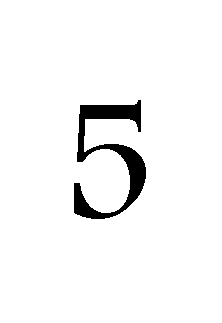
<style>
.page{position:relative;width:222px;height:323px;background:#ffffff}
.page>*{position:absolute;margin:0}
.t1{font:180px "FootlightMTLight";color:#000000}
</style>
<div class="page">
<p class="t1" style="left:74px;top:100px;width:72px;height:119px">5</p>
</div>
